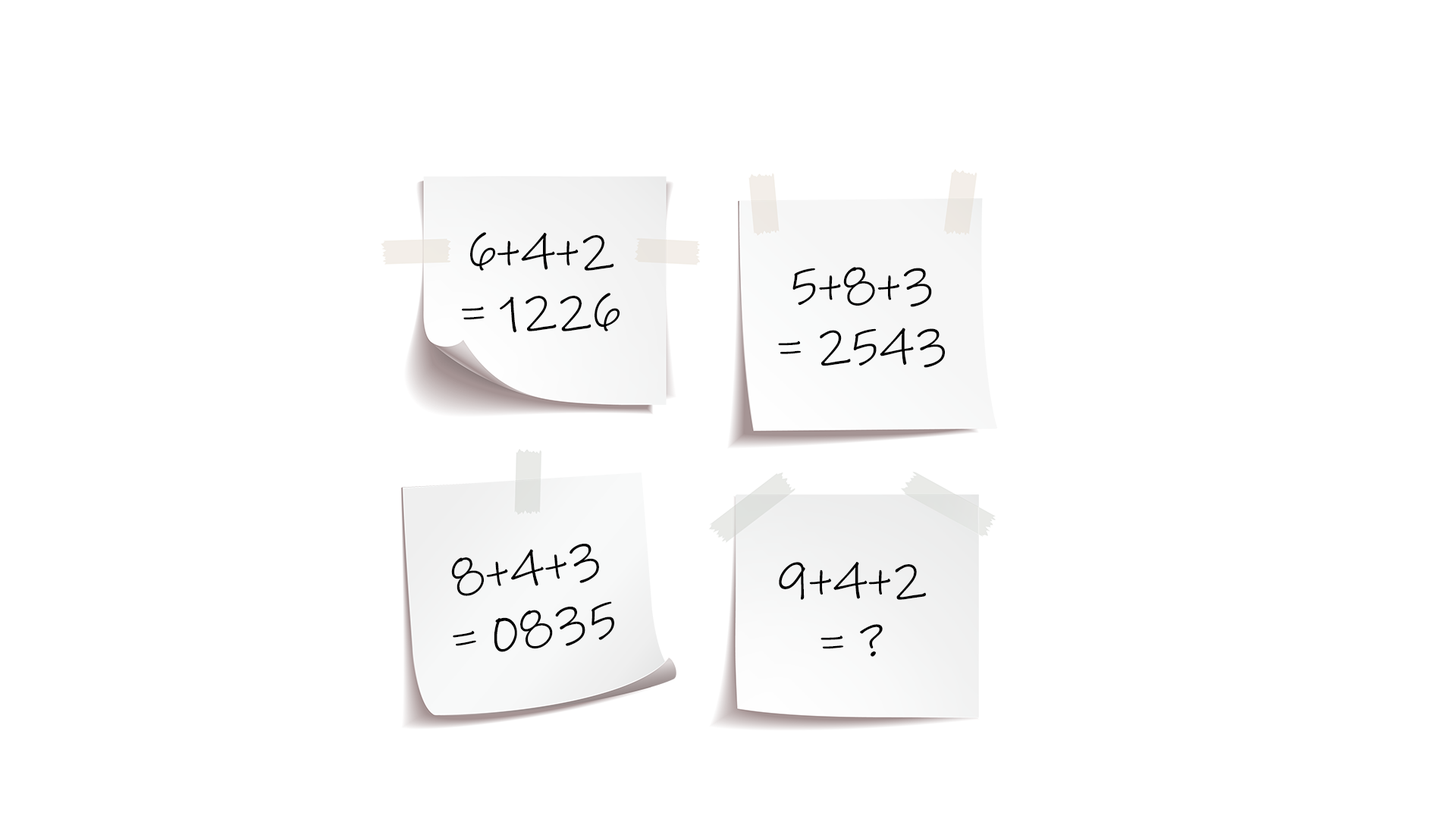
<style>
.page{position:relative;width:1456px;height:819px;background:#ffffff}
.page>*{position:absolute;margin:0}
.t1{font:50.6px "InkFree";color:#000000}
</style>
<div class="page">
<p class="t1" style="left:462px;top:232px;width:158px;height:101px;text-align:center">6+4+2 <br>= 1226</p>
<p class="t1" style="left:778px;top:267px;width:167px;height:101px;text-align:center">5+8+3<br>= 2543</p>
<p class="t1" style="left:451px;top:544px;width:163px;height:108px;text-align:center;rotate:-7deg">8+4+3<br>= 0835</p>
<p class="t1" style="left:779px;top:562px;width:147px;height:95px;text-align:center">9+4+2<br>= ?</p>
</div>
